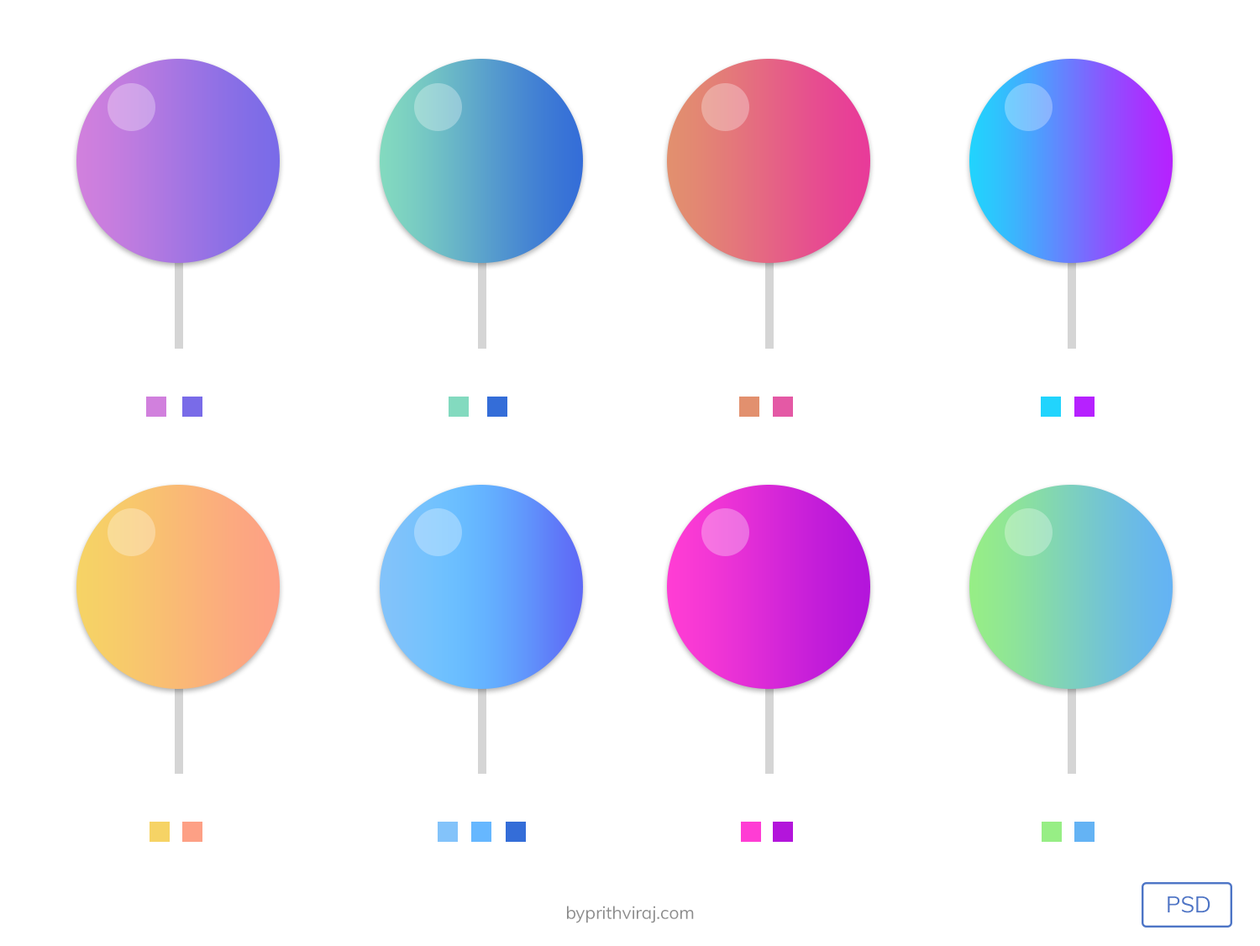
<style>
.page{position:relative;width:1260px;height:946px;background:#ffffff}
.page>*{position:absolute;margin:0}
.t1{font:17.5px "Muli-Regular";color:#8c8c8c}
.t2{font:22.4px "Muli-Regular";color:#4d75c6}
</style>
<div class="page">
<p class="t1" style="left:567px;top:906px;width:127px;height:17px">byprithviraj.com</p>
<p class="t2" style="left:1168px;top:896px;width:43px;height:17px">PSD</p>
</div>
